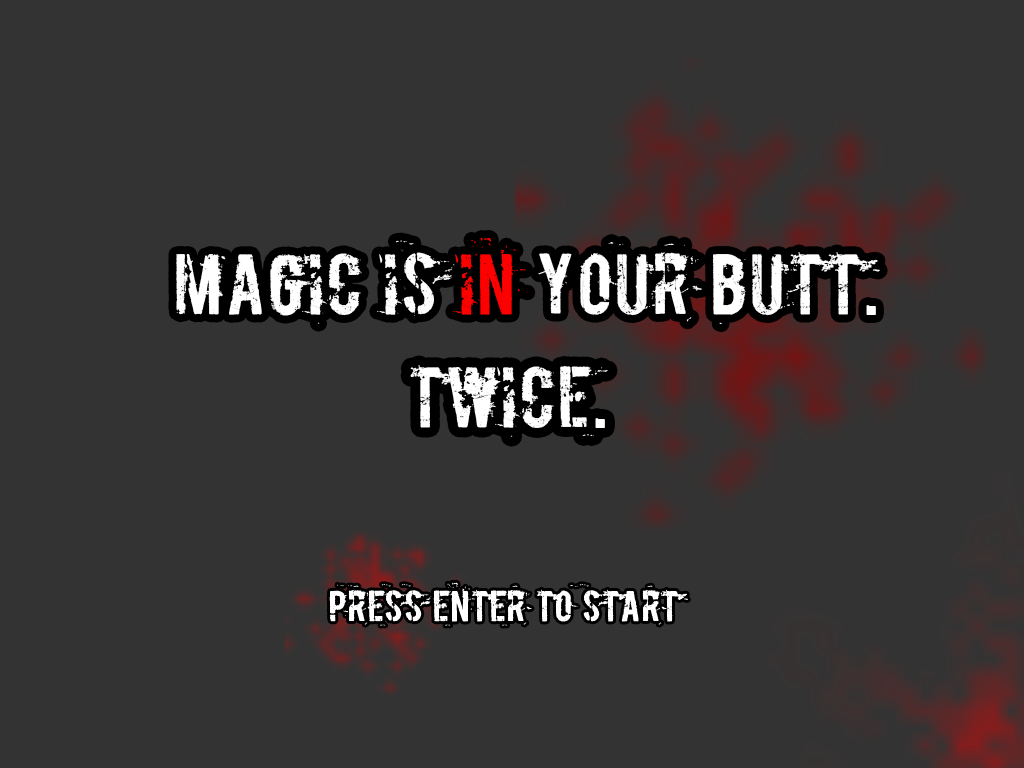
<style>
.page{position:relative;width:1024px;height:768px;background:#333333}
.page>*{position:absolute;margin:0}
.t1{font:72px "Boycott";color:#ffffff}
.t2{font:72px "Boycott";color:#ff0000}
.t3{font:36px "Boycott";color:#ffffff}
</style>
<div class="page">
<p class="t1" style="left:176px;top:238px;width:704px;height:87px">Magic is <span class="t2">in</span> your butt.</p>
<p class="t1" style="left:410px;top:365px;width:198px;height:72px">Twice.</p>
<p class="t3" style="left:329px;top:582px;width:359px;height:44px">Press enter to start</p>
</div>
